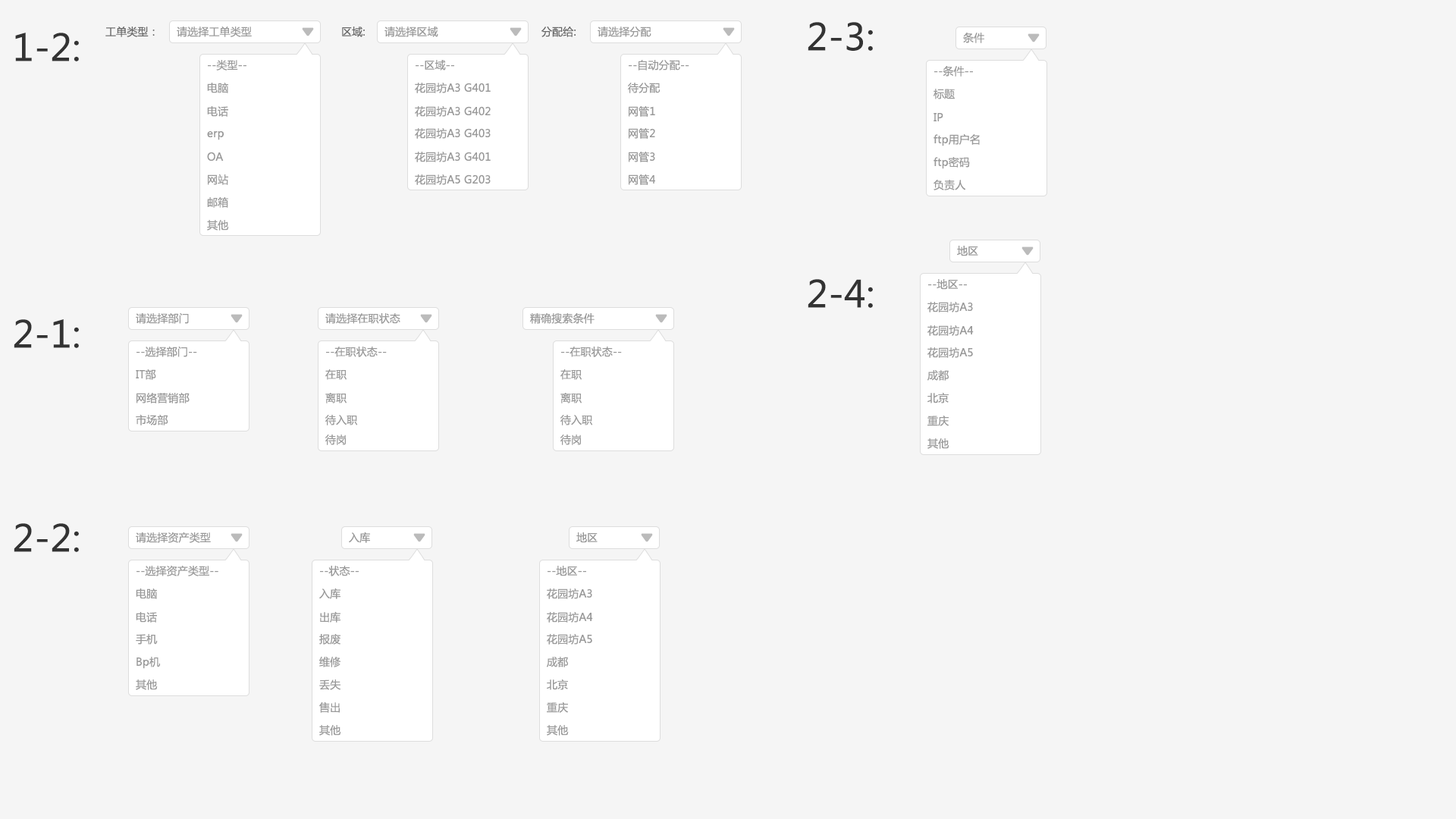
<style>
.page{position:relative;width:1456px;height:819px;background:#f5f5f5}
.page>*{position:absolute;margin:0}
.t1{font:10.6px "MicrosoftYaHei";letter-spacing:0.01em;color:#666666}
.t2{font:10.6px "MicrosoftYaHei";letter-spacing:0.01em;color:#999999}
.t3{font:36.4px "MicrosoftYaHei";letter-spacing:0.01em;color:#333333}
</style>
<div class="page">
<p class="t1" style="left:105px;top:27px;width:50px;height:10px">工单类型：</p>
<p class="t2" style="left:177px;top:27px;width:75px;height:10px">请选择工单类型</p>
<p class="t1" style="left:342px;top:27px;width:23px;height:10px">区域:</p>
<p class="t2" style="left:384px;top:27px;width:54px;height:10px">请选择区域</p>
<p class="t1" style="left:541px;top:27px;width:35px;height:10px">分配给:</p>
<p class="t2" style="left:598px;top:27px;width:53px;height:10px">请选择分配</p>
<p class="t3" style="left:808px;top:22px;width:65px;height:29px">2-3:</p>
<p class="t3" style="left:15px;top:33px;width:64px;height:28px">1-2:</p>
<p class="t2" style="left:963px;top:33px;width:21px;height:10px">条件</p>
<p class="t2" style="left:208px;top:60px;width:38px;height:11px">--类型--</p>
<p class="t2" style="left:416px;top:60px;width:38px;height:11px">--区域--</p>
<p class="t2" style="left:629px;top:60px;width:60px;height:11px">--自动分配--</p>
<p class="t2" style="left:934px;top:66px;width:39px;height:11px">--条件--</p>
<p class="t2" style="left:207px;top:83px;width:21px;height:10px">电脑</p>
<p class="t2" style="left:415px;top:83px;width:76px;height:10px">花园坊A3 G401</p>
<p class="t2" style="left:628px;top:83px;width:32px;height:10px">待分配</p>
<p class="t2" style="left:933px;top:89px;width:22px;height:10px">标题</p>
<p class="t2" style="left:207px;top:106px;width:21px;height:11px">电话</p>
<p class="t2" style="left:415px;top:106px;width:76px;height:11px">花园坊A3 G402</p>
<p class="t2" style="left:629px;top:106px;width:26px;height:11px">网管1</p>
<p class="t2" style="left:933px;top:113px;width:10px;height:8px">IP</p>
<p class="t2" style="left:207px;top:131px;width:17px;height:9px">erp</p>
<p class="t2" style="left:415px;top:128px;width:76px;height:11px">花园坊A3 G403</p>
<p class="t2" style="left:629px;top:128px;width:26px;height:11px">网管2</p>
<p class="t2" style="left:933px;top:133px;width:47px;height:13px">ftp用户名</p>
<p class="t2" style="left:207px;top:152px;width:17px;height:9px">OA</p>
<p class="t2" style="left:415px;top:152px;width:76px;height:10px">花园坊A3 G401</p>
<p class="t2" style="left:629px;top:152px;width:26px;height:10px">网管3</p>
<p class="t2" style="left:933px;top:157px;width:37px;height:12px">ftp密码</p>
<p class="t2" style="left:208px;top:174px;width:20px;height:11px">网站</p>
<p class="t2" style="left:415px;top:174px;width:76px;height:11px">花园坊A5 G203</p>
<p class="t2" style="left:629px;top:174px;width:26px;height:11px">网管4</p>
<p class="t2" style="left:933px;top:180px;width:33px;height:10px">负责人</p>
<p class="t2" style="left:207px;top:197px;width:21px;height:11px">邮箱</p>
<p class="t2" style="left:207px;top:220px;width:22px;height:11px">其他</p>
<p class="t2" style="left:957px;top:246px;width:21px;height:10px">地区</p>
<p class="t3" style="left:808px;top:279px;width:65px;height:29px">2-4:</p>
<p class="t2" style="left:928px;top:279px;width:39px;height:11px">--地区--</p>
<p class="t2" style="left:927px;top:302px;width:46px;height:10px">花园坊A3</p>
<p class="t2" style="left:136px;top:313px;width:53px;height:11px">请选择部门</p>
<p class="t2" style="left:325px;top:313px;width:75px;height:11px">请选择在职状态</p>
<p class="t2" style="left:530px;top:313px;width:65px;height:11px">精确搜索条件</p>
<p class="t3" style="left:14px;top:319px;width:65px;height:29px">2-1:</p>
<p class="t2" style="left:927px;top:325px;width:47px;height:11px">花园坊A4</p>
<p class="t2" style="left:136px;top:347px;width:61px;height:10px">--选择部门--</p>
<p class="t2" style="left:326px;top:347px;width:61px;height:10px">--在职状态--</p>
<p class="t2" style="left:561px;top:347px;width:61px;height:10px">--在职状态--</p>
<p class="t2" style="left:927px;top:347px;width:46px;height:11px">花园坊A5</p>
<p class="t2" style="left:136px;top:369px;width:20px;height:11px">IT部</p>
<p class="t2" style="left:325px;top:369px;width:22px;height:11px">在职</p>
<p class="t2" style="left:560px;top:369px;width:22px;height:11px">在职</p>
<p class="t2" style="left:927px;top:370px;width:22px;height:11px">成都</p>
<p class="t2" style="left:136px;top:393px;width:54px;height:10px">网络营销部</p>
<p class="t2" style="left:325px;top:393px;width:22px;height:10px">离职</p>
<p class="t2" style="left:560px;top:393px;width:22px;height:10px">离职</p>
<p class="t2" style="left:927px;top:393px;width:22px;height:10px">北京</p>
<p class="t2" style="left:136px;top:414px;width:32px;height:11px">市场部</p>
<p class="t2" style="left:325px;top:415px;width:33px;height:10px">待入职</p>
<p class="t2" style="left:560px;top:415px;width:33px;height:10px">待入职</p>
<p class="t2" style="left:927px;top:416px;width:22px;height:10px">重庆</p>
<p class="t2" style="left:325px;top:435px;width:21px;height:10px">待岗</p>
<p class="t2" style="left:560px;top:435px;width:21px;height:10px">待岗</p>
<p class="t2" style="left:927px;top:438px;width:22px;height:11px">其他</p>
<p class="t3" style="left:14px;top:523px;width:65px;height:29px">2-2:</p>
<p class="t2" style="left:136px;top:532px;width:75px;height:11px">请选择资产类型</p>
<p class="t2" style="left:349px;top:532px;width:21px;height:11px">入库</p>
<p class="t2" style="left:576px;top:532px;width:22px;height:11px">地区</p>
<p class="t2" style="left:136px;top:565px;width:82px;height:11px">--选择资产类型--</p>
<p class="t2" style="left:320px;top:566px;width:39px;height:10px">--状态--</p>
<p class="t2" style="left:548px;top:566px;width:38px;height:10px">--地区--</p>
<p class="t2" style="left:136px;top:588px;width:21px;height:11px">电脑</p>
<p class="t2" style="left:319px;top:588px;width:21px;height:11px">入库</p>
<p class="t2" style="left:547px;top:588px;width:45px;height:11px">花园坊A3</p>
<p class="t2" style="left:136px;top:612px;width:21px;height:11px">电话</p>
<p class="t2" style="left:320px;top:611px;width:20px;height:12px">出库</p>
<p class="t2" style="left:547px;top:612px;width:46px;height:11px">花园坊A4</p>
<p class="t2" style="left:136px;top:634px;width:22px;height:11px">手机</p>
<p class="t2" style="left:319px;top:634px;width:21px;height:11px">报废</p>
<p class="t2" style="left:547px;top:634px;width:45px;height:11px">花园坊A5</p>
<p class="t2" style="left:136px;top:657px;width:24px;height:12px">Bp机</p>
<p class="t2" style="left:319px;top:657px;width:21px;height:10px">维修</p>
<p class="t2" style="left:547px;top:657px;width:21px;height:10px">成都</p>
<p class="t2" style="left:136px;top:679px;width:22px;height:11px">其他</p>
<p class="t2" style="left:319px;top:679px;width:21px;height:11px">丢失</p>
<p class="t2" style="left:547px;top:679px;width:21px;height:11px">北京</p>
<p class="t2" style="left:319px;top:701px;width:21px;height:12px">售出</p>
<p class="t2" style="left:547px;top:702px;width:21px;height:11px">重庆</p>
<p class="t2" style="left:319px;top:725px;width:22px;height:11px">其他</p>
<p class="t2" style="left:547px;top:725px;width:22px;height:11px">其他</p>
</div>
